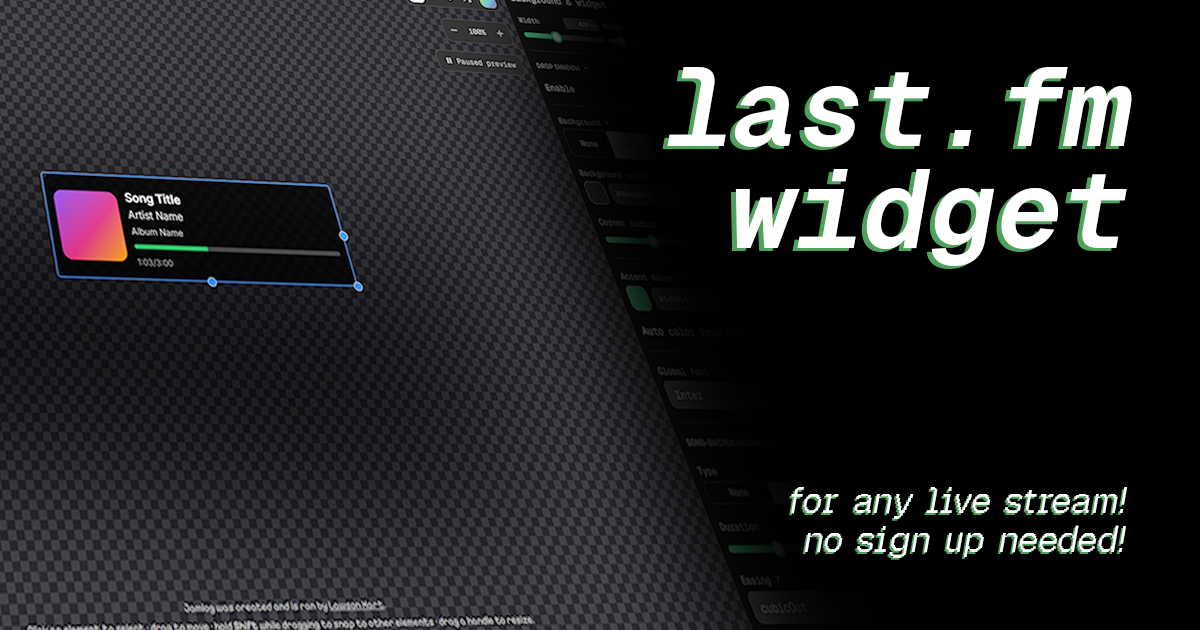
<style>
.page{position:relative;width:1200px;height:630px;background:#000000}
.page>*{position:absolute;margin:0}
.t1{font:111.2px "GeistMono-Bold";color:#ffffff;font-style:italic}
.t2{font:36.2px "GeistPixel-Square";color:#ffffff;font-style:italic}
</style>
<div class="page">
<p class="t1" style="left:667px;top:67px;width:465px;height:80px">last.fm</p>
<p class="t1" style="left:735px;top:169px;width:392px;height:97px">widget</p>
<p class="t2" style="left:791px;top:487px;width:336px;height:32px">for any live stream!</p>
<p class="t2" style="left:804px;top:525px;width:322px;height:33px">no sign up needed!</p>
</div>
